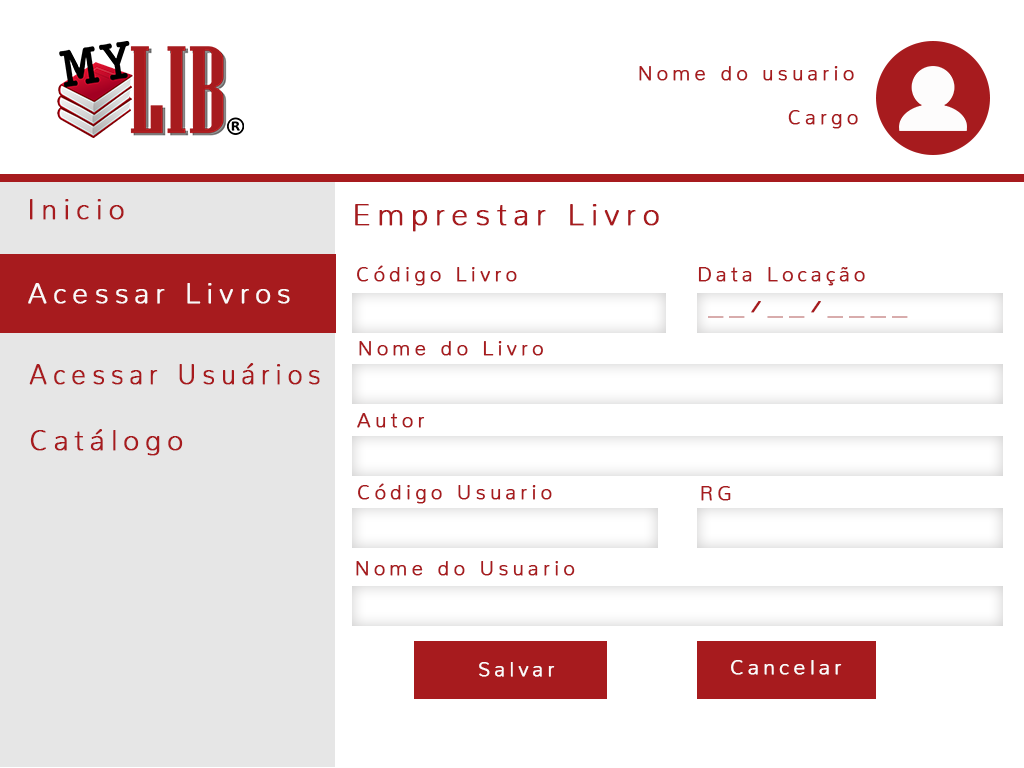
<style>
.page{position:relative;width:1024px;height:768px;background:#ffffff}
.page>*{position:absolute;margin:0}
.t1{font:20px "Nunito-ExtraLight";letter-spacing:0.2em;color:#a71b1e;font-weight:bold}
.t2{font:28px "Nunito-ExtraLight";letter-spacing:0.2em;color:#a71b1e;font-weight:bold}
.t3{font:30px "Nunito-ExtraLight";letter-spacing:0.2em;color:#a71b1e;font-weight:bold}
.t4{font:28px "Nunito-ExtraLight";letter-spacing:0.2em;color:#fbf9f9;font-weight:bold}
.t5{font:20px "Nunito-ExtraLight";letter-spacing:0.2em;color:#a71b1e;font-weight:bold;scale:1.47 1}
.t6{font:28px "Nunito-ExtraLight";letter-spacing:0.2em;color:#a71b1e;font-weight:bold;scale:0.94 1}
.t7{font:20px "Nunito-ExtraLight";letter-spacing:0.2em;color:#fcfbfb;font-weight:bold}
</style>
<div class="page">
<p class="t1" style="left:639px;top:66px;width:215px;height:15px">Nome do usuario</p>
<p class="t1" style="left:788px;top:110px;width:70px;height:19px">Cargo</p>
<p class="t2" style="left:30px;top:199px;width:94px;height:21px">Inicio</p>
<p class="t3" style="left:355px;top:204px;width:304px;height:28px">Emprestar Livro</p>
<p class="t1" style="left:357px;top:265px;width:160px;height:21px">Código Livro</p>
<p class="t1" style="left:698px;top:267px;width:167px;height:19px">Data Locação</p>
<p class="t4" style="left:28px;top:283px;width:262px;height:21px">Acessar Livros</p>
<p class="t5" style="left:708px;top:301px;width:200px;height:17px">__/__/____</p>
<p class="t1" style="left:359px;top:341px;width:184px;height:15px">Nome do Livro</p>
<p class="t6" style="left:29px;top:363px;width:291px;height:22px">Acessar Usuários</p>
<p class="t1" style="left:357px;top:413px;width:68px;height:15px">Autor</p>
<p class="t2" style="left:30px;top:429px;width:153px;height:27px">Catálogo</p>
<p class="t1" style="left:358px;top:483px;width:194px;height:21px">Código Usuario</p>
<p class="t1" style="left:701px;top:486px;width:30px;height:15px">RG</p>
<p class="t1" style="left:356px;top:561px;width:219px;height:15px">Nome do Usuario</p>
<p class="t7" style="left:479px;top:662px;width:76px;height:15px">Salvar</p>
<p class="t7" style="left:731px;top:660px;width:111px;height:15px">Cancelar</p>
</div>
